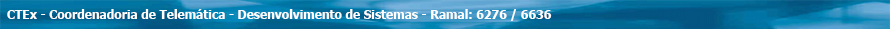
<style>
.page{position:relative;width:890px;height:29px}
.page>*{position:absolute;margin:0}
.t1{font:12px "Tahoma-Bold";color:#ffffff}
</style>
<div class="page">
<p class="t1" style="left:7px;top:9px;width:545px;height:12px">CTEx - Coordenadoria de Telemática - Desenvolvimento de Sistemas - Ramal: 6276 / 6636</p>
</div>
